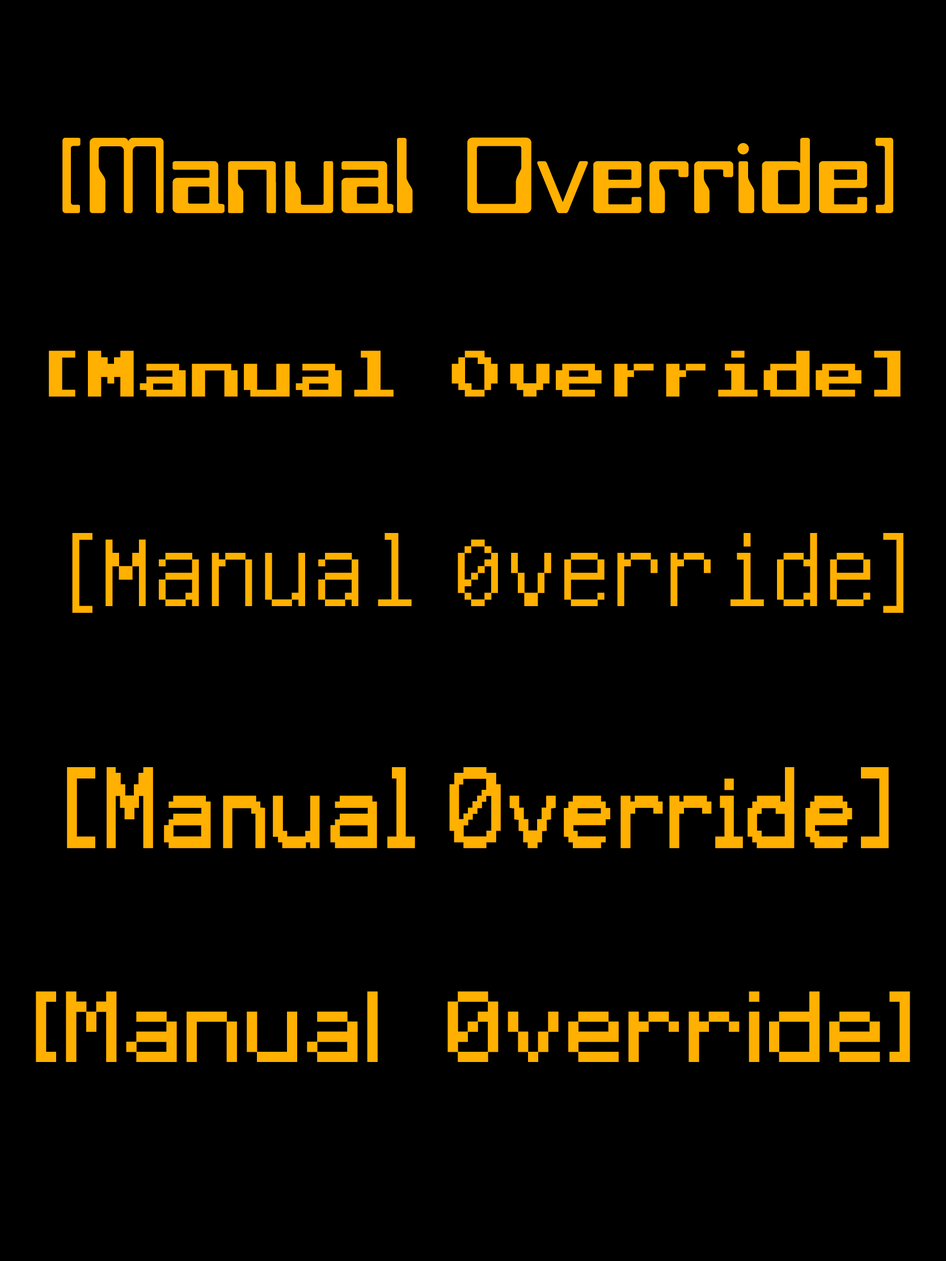
<style>
.page{position:relative;width:946px;height:1261px;background:#000000}
.page>*{position:absolute;margin:0}
.t1{font:106.3px "bitwise";color:#ffb000}
.t2{font:52px "PressStart2P-Regular";color:#ffb000}
.t3{font:106.3px "Video";color:#ffb000}
.t4{font:106.3px "KarmaSuture";color:#ffb000}
.t5{font:80.3px "RosesareFF0000";color:#ffb000}
</style>
<div class="page">
<p class="t1" style="left:36px;top:137px;width:874px;height:925px;text-align:center">[Manual 0verride]<br><br><span class="t2">[Manual 0verride]<br><br></span><span class="t3">[Manual 0verride]<br><br></span><span class="t4">[Manual 0verride]<br><br></span><span class="t5">[Manual 0verride]</span></p>
</div>
